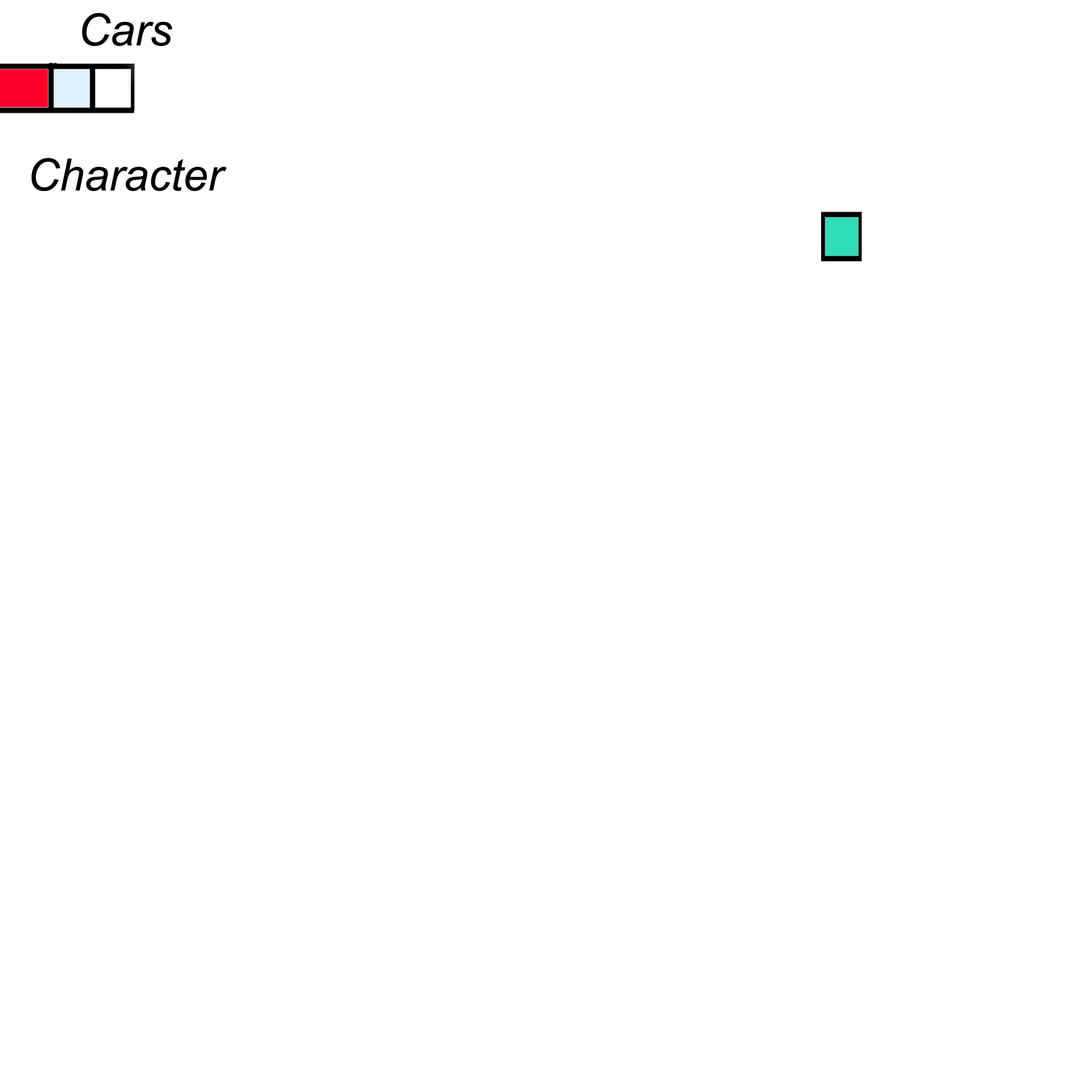
<style>
.page{position:relative;width:1092px;height:1092px;background:#ffffff}
.page>*{position:absolute;margin:0}
.t1{font:44.4px "Arial-ItalicMT";color:#000000}
</style>
<div class="page">
<p class="t1" style="left:82px;top:13px;width:90px;height:33px">Cars</p>
<p class="t1" style="left:31px;top:158px;width:196px;height:33px">Character</p>
</div>
